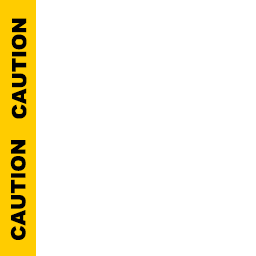
<style>
.page{position:relative;width:256px;height:256px;background:#ffffff}
.page>*{position:absolute;margin:0}
.t1{font:19.8px "Arial-Black";color:#000000}
</style>
<div class="page">
<p class="t1" style="left:11px;top:18px;width:16px;height:101px;rotate:-90deg">CAUTION</p>
<p class="t1" style="left:10px;top:140px;width:16px;height:100px;rotate:-90deg">CAUTION</p>
</div>
